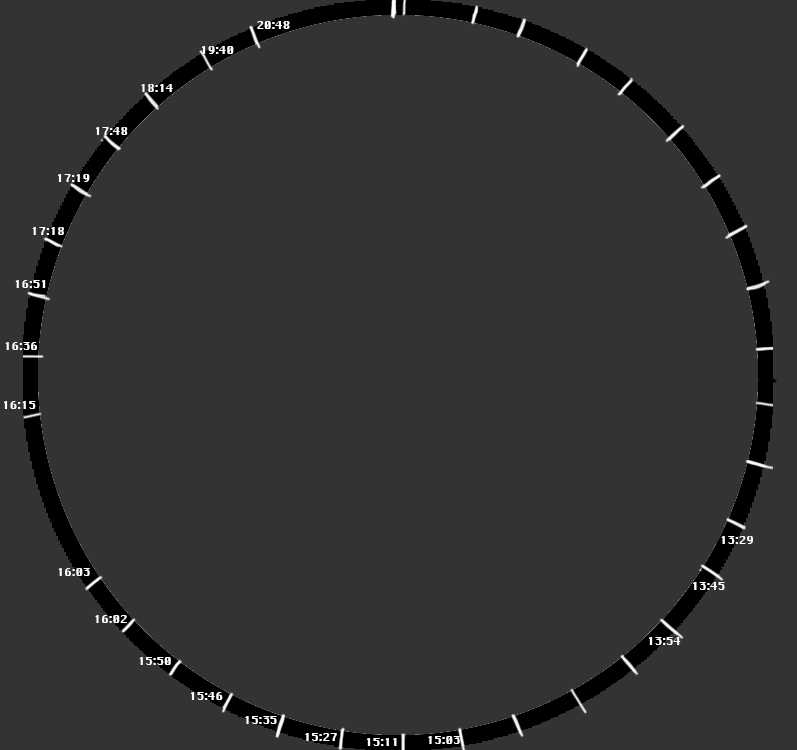
<style>
.page{position:relative;width:797px;height:750px;background:#333333}
.page>*{position:absolute;margin:0}
.t1{font:11.2px "Krungthep";color:#ffffff}
</style>
<div class="page">
<p class="t1" style="left:257px;top:21px;width:33px;height:8px">20:48</p>
<p class="t1" style="left:202px;top:46px;width:32px;height:8px">19:40</p>
<p class="t1" style="left:141px;top:84px;width:32px;height:8px">18:14</p>
<p class="t1" style="left:96px;top:127px;width:32px;height:8px">17:48</p>
<p class="t1" style="left:58px;top:174px;width:32px;height:8px">17:19</p>
<p class="t1" style="left:32px;top:227px;width:32px;height:8px">17:18</p>
<p class="t1" style="left:15px;top:280px;width:31px;height:8px">16:51</p>
<p class="t1" style="left:5px;top:342px;width:32px;height:8px">16:36</p>
<p class="t1" style="left:4px;top:401px;width:32px;height:8px">16:15</p>
<p class="t1" style="left:721px;top:536px;width:32px;height:8px">13:29</p>
<p class="t1" style="left:58px;top:568px;width:32px;height:8px">16:03</p>
<p class="t1" style="left:693px;top:582px;width:32px;height:8px">13:45</p>
<p class="t1" style="left:95px;top:615px;width:32px;height:8px">16:02</p>
<p class="t1" style="left:649px;top:637px;width:32px;height:8px">13:54</p>
<p class="t1" style="left:139px;top:657px;width:32px;height:8px">15:50</p>
<p class="t1" style="left:191px;top:692px;width:32px;height:8px">15:46</p>
<p class="t1" style="left:245px;top:716px;width:32px;height:8px">15:35</p>
<p class="t1" style="left:305px;top:733px;width:32px;height:8px">15:27</p>
<p class="t1" style="left:428px;top:736px;width:32px;height:8px">15:03</p>
<p class="t1" style="left:367px;top:738px;width:30px;height:8px">15:11</p>
</div>
